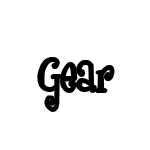
<style>
.page{position:relative;width:150px;height:150px;background:#ffffff}
.page>*{position:absolute;margin:0}
.t1{font:51.2px "GirlsareWeird";color:#000000}
</style>
<div class="page">
<p class="t1" style="left:39px;top:59px;width:74px;height:51px">Gear</p>
</div>
